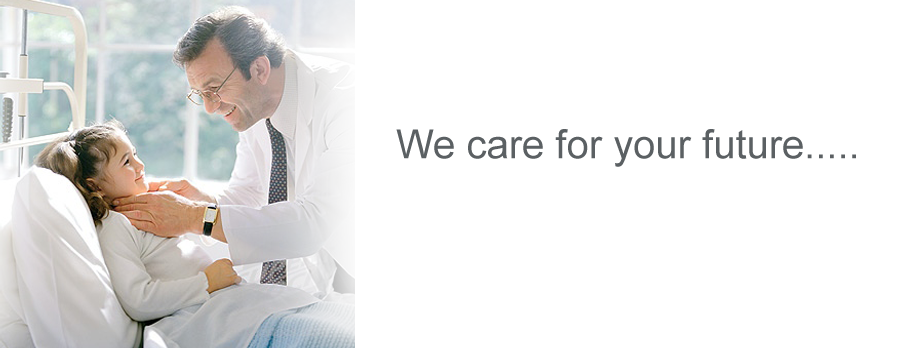
<style>
.page{position:relative;width:900px;height:348px;background:#ffffff}
.page>*{position:absolute;margin:0}
.t1{font:40px "ArialMT";color:#5b6063}
</style>
<div class="page">
<p class="t1" style="left:396px;top:129px;width:460px;height:38px">We care for your future.....</p>
</div>
